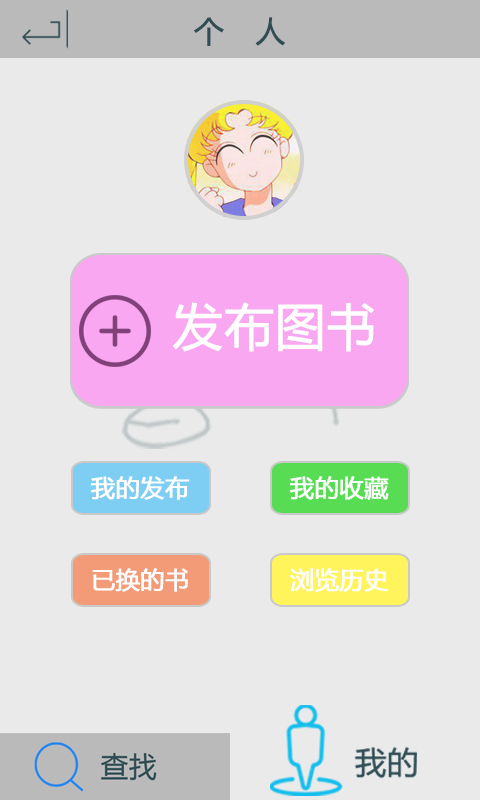
<style>
.page{position:relative;width:480px;height:800px;background:#eaeaea}
.page>*{position:absolute;margin:0}
.t1{font:30px "MicrosoftYaHei";color:#304d54;font-weight:bold}
.t2{font:50px "MicrosoftYaHei";color:#ffffff;font-weight:bold}
.t3{font:24px "MicrosoftYaHei";color:#ffffff;font-weight:bold}
</style>
<div class="page">
<p class="t1" style="left:194px;top:17px;width:91px;height:29px">个　人</p>
<p class="t2" style="left:173px;top:302px;width:201px;height:50px">发布图书</p>
<p class="t3" style="left:91px;top:476px;width:99px;height:24px">我的发布</p>
<p class="t3" style="left:290px;top:476px;width:99px;height:24px">我的收藏</p>
<p class="t3" style="left:92px;top:568px;width:96px;height:24px">已换的书</p>
<p class="t3" style="left:290px;top:568px;width:98px;height:24px">浏览历史</p>
</div>
